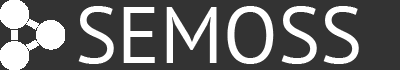
<style>
.page{position:relative;width:400px;height:70px;background:#333333}
.page>*{position:absolute;margin:0}
.t1{font:80px "PTSans-Regular";color:#ffffff}
</style>
<div class="page">
<p class="t1" style="left:78px;top:6px;width:281px;height:58px">SEMOSS</p>
</div>
